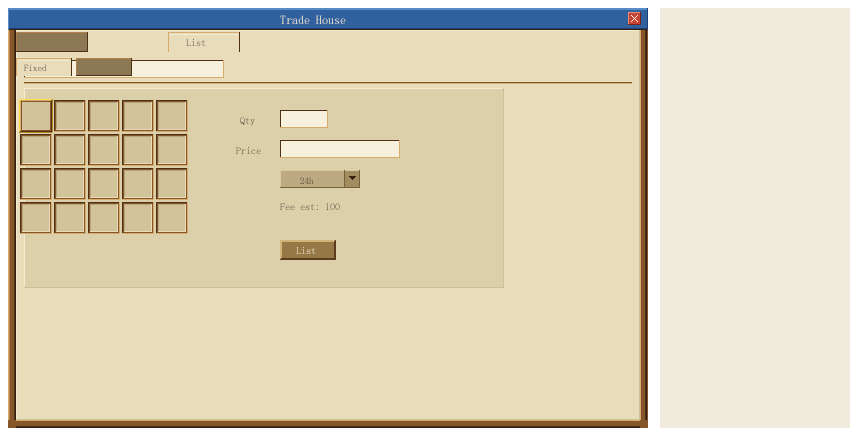
<style>
.page{position:relative;width:860px;height:440px;background:#e8dcba}
.page>*{position:absolute;margin:0}
.t1{font:12px "SimSun"}
.t2{font:10px "SimSun"}
.t3{font:9px "SimSun"}
</style>
<div class="page">
<p class="t1" style="left:280px;top:15px;width:66px;height:9px">Trade House</p>
<p class="t2" style="left:186px;top:39px;width:20px;height:7px">List</p>
<p class="t3" style="left:24px;top:64px;width:23px;height:7px">Fixed</p>
<p class="t2" style="left:240px;top:117px;width:15px;height:9px">Qty</p>
<p class="t2" style="left:236px;top:147px;width:25px;height:7px">Price</p>
<p class="t3" style="left:300px;top:177px;width:14px;height:7px">24h</p>
<p class="t2" style="left:280px;top:203px;width:60px;height:7px">Fee est: 100</p>
<p class="t2" style="left:296px;top:247px;width:20px;height:7px">List</p>
</div>
